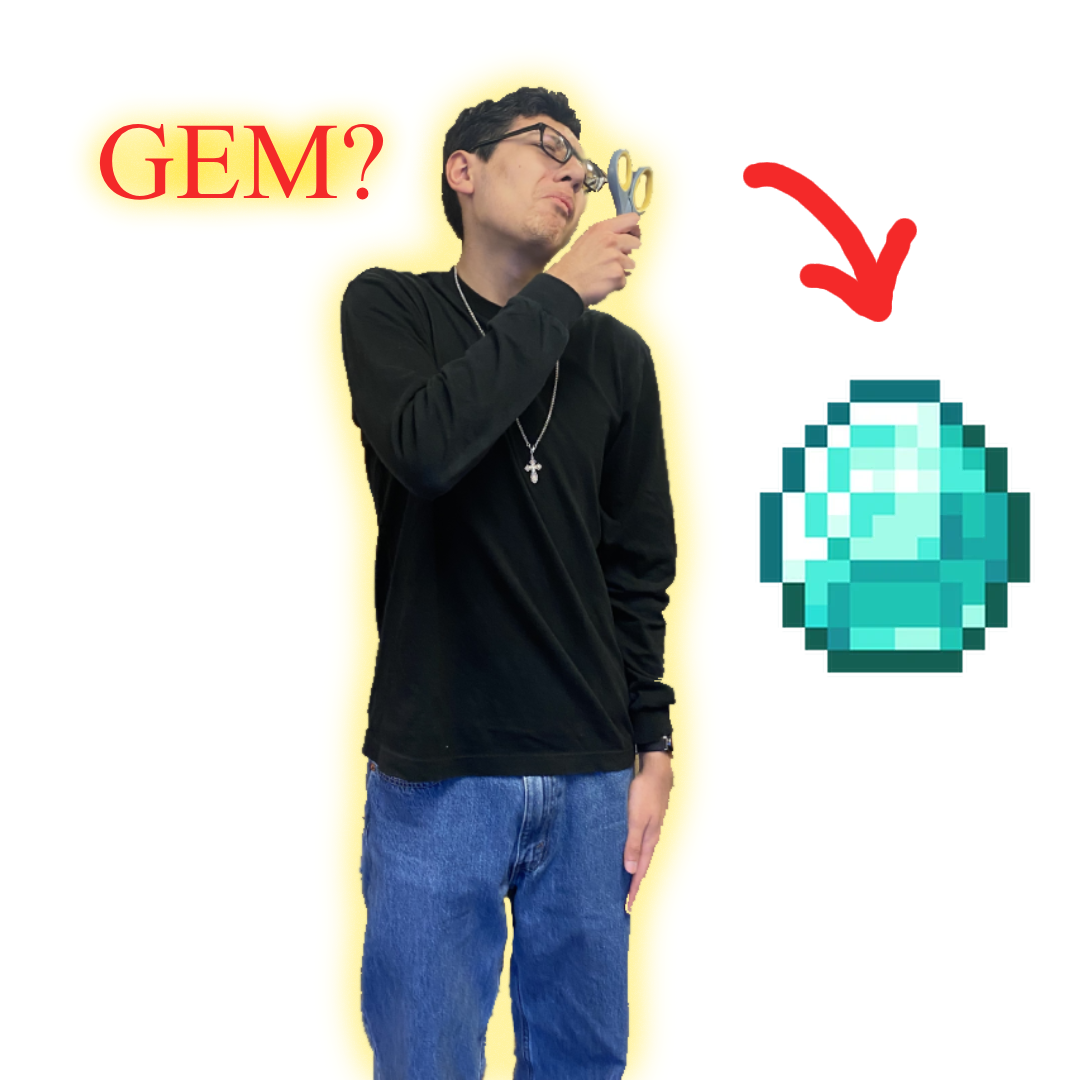
<style>
.page{position:relative;width:1080px;height:1080px;background:#ffffff}
.page>*{position:absolute;margin:0}
.t1{font:109.2px "TimesNewRomanPSMT";color:#f42929}
</style>
<div class="page">
<p class="t1" style="left:99px;top:124px;width:285px;height:76px">GEM?</p>
</div>
